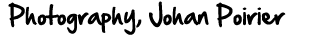
<style>
.page{position:relative;width:320px;height:35px;background:#ffffff}
.page>*{position:absolute;margin:0}
.t1{font:22px "HandOfSean";color:#000000}
</style>
<div class="page">
<p class="t1" style="left:8px;top:1px;width:278px;height:34px">Photography, Johan Poirier</p>
</div>
